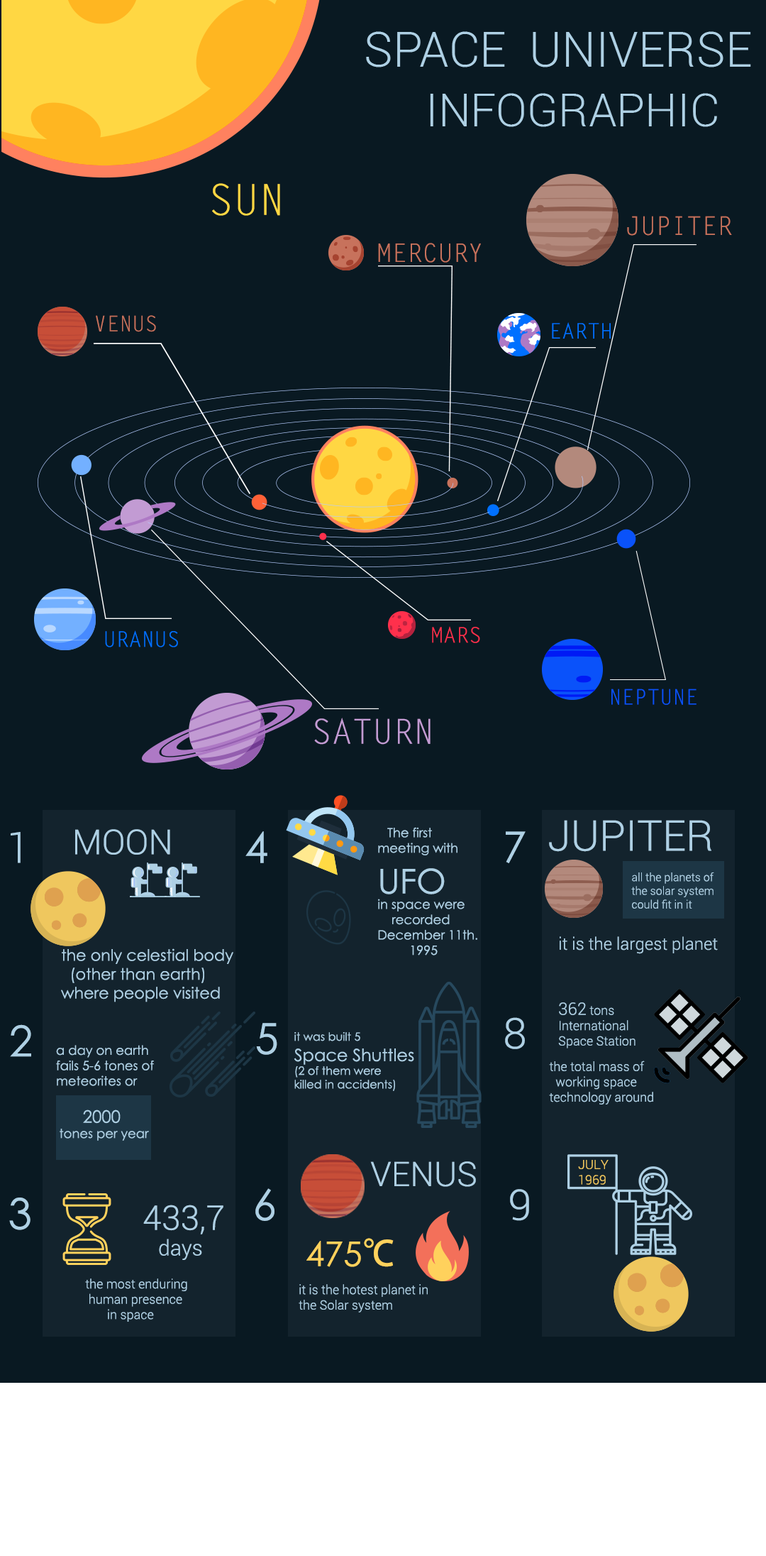
<style>
.page{position:relative;width:766px;height:1556px;background:#091922}
.page>*{position:absolute;margin:0}
.t1{font:42.6px "LetterGothicStd";color:#ffd743}
.t2{font:25.5px "LetterGothicStd";color:#c7725c}
.t3{font:21.3px "LetterGothicStd";color:#c7725c}
.t4{font:21.3px "LetterGothicStd";color:#0070ff}
.t5{font:21.3px "LetterGothicStd";color:#ff304c}
.t6{font:21.3px "LetterGothicStd";color:#0a52fa}
.t7{font:34.1px "LetterGothicStd";color:#c29bd3}
.t8{font:42.6px "Roboto-Light";color:#aed0e4}
.t9{font:34.5px "Roboto-Light";color:#aed0e4}
.t10{font:42.6px "CenturyGothic";color:#aed0e4}
.t11{font:12.8px "CenturyGothic";color:#aed0e4}
.t12{font:11.4px "CenturyGothic";color:#aed0e4}
.t13{font:34.1px "CenturyGothic";color:#aed0e4}
.t14{font:11.4px "Roboto-Light";color:#aed0e4}
.t15{font:17px "Roboto-Light";color:#aed0e4}
.t16{font:15.8px "CenturyGothic";color:#aed0e4}
.t17{font:12.8px "Roboto-Light";color:#aed0e4}
.t18{font:17px "CenturyGothic";color:#aed0e4}
.t19{font:34.1px "Roboto-Light";color:#aed0e4}
.t20{font:12.8px "Roboto-Light";color:#efc75e}
.t21{font:21.3px "Roboto-Light";color:#aed0e4}
.t22{font:34.1px "CenturyGothic";color:#ffd15c}
.t23{font:34.1px "AdobeHeitiStd-Regular";color:#ffd15c}
</style>
<div class="page">
<p class="t1" style="left:212px;top:183px;width:68px;height:33px">SUN</p>
<p class="t2" style="left:627px;top:216px;width:105px;height:20px">JUPITER</p>
<p class="t2" style="left:378px;top:243px;width:103px;height:20px">MERCURY</p>
<p class="t3" style="left:96px;top:315px;width:60px;height:17px">VENUS</p>
<p class="t4" style="left:552px;top:322px;width:59px;height:17px">EARTH</p>
<p class="t5" style="left:432px;top:626px;width:48px;height:17px">MARS</p>
<p class="t4" style="left:105px;top:630px;width:73px;height:17px">URANUS</p>
<p class="t6" style="left:612px;top:688px;width:85px;height:17px">NEPTUNE</p>
<p class="t7" style="left:314px;top:718px;width:117px;height:26px">SATURN</p>
<p class="t8" style="left:549px;top:820px;width:163px;height:32px">JUPITER</p>
<p class="t8" style="left:11px;top:832px;width:10px;height:31px">1</p>
<p class="t9" style="left:75px;top:829px;width:95px;height:25px">MOON</p>
<p class="t10" style="left:246px;top:831px;width:22px;height:32px">4</p>
<p class="t11" style="left:378px;top:827px;width:100px;height:128px"><span class="t12">  </span> The first  <br>meeting with <br><span class="t13">UFO <br></span>in space were <br>    recorded <br>December 11th.<br>         1995</p>
<p class="t10" style="left:506px;top:831px;width:20px;height:32px">7</p>
<p class="t14" style="left:632px;top:872px;width:83px;height:36px">all the planets of <br>the solar system <br>could fit in it</p>
<p class="t15" style="left:560px;top:936px;width:158px;height:18px">it is the largest planet</p>
<p class="t16" style="left:61px;top:948px;width:172px;height:54px">the only celestial body<br>  (other than earth) <br>where people visited</p>
<p class="t17" style="left:559px;top:1002px;width:77px;height:46px"><span class="t15">362</span> tons <br>International <br>Space Station</p>
<p class="t10" style="left:10px;top:1024px;width:21px;height:33px">2</p>
<p class="t10" style="left:256px;top:1023px;width:21px;height:32px">5</p>
<p class="t8" style="left:505px;top:1017px;width:20px;height:32px">8</p>
<p class="t12" style="left:294px;top:1032px;width:120px;height:59px">it was built 5 <br><span class="t18">Space Shuttles <br></span>(2 of them were <br>killed in accidents)</p>
<p class="t11" style="left:56px;top:1045px;width:98px;height:41px">a day on earth<br>fails 5-6 tones of <br>meteorites or</p>
<p class="t17" style="left:549px;top:1060px;width:105px;height:44px">the total mass of <br>  working space <br>technology around</p>
<p class="t11" style="left:60px;top:1109px;width:89px;height:32px"><span class="t18">     2000<br></span>tones per year</p>
<p class="t19" style="left:370px;top:1161px;width:106px;height:26px">VENUS</p>
<p class="t20" style="left:578px;top:1160px;width:31px;height:25px">JULY<br>1969</p>
<p class="t10" style="left:255px;top:1188px;width:20px;height:33px">6</p>
<p class="t8" style="left:510px;top:1189px;width:19px;height:32px">9</p>
<p class="t10" style="left:9px;top:1197px;width:22px;height:33px">3</p>
<p class="t19" style="left:143px;top:1204px;width:81px;height:56px">433,7<br><span class="t21">   days</span></p>
<p class="t22" style="left:307px;top:1238px;width:87px;height:29px">475<span class="t23">℃</span></p>
<p class="t17" style="left:85px;top:1278px;width:102px;height:43px">the most enduring <br> human presence <br>       in space</p>
<p class="t17" style="left:299px;top:1284px;width:129px;height:28px">it is the hotest planet in<br>the Solar system</p>
</div>
